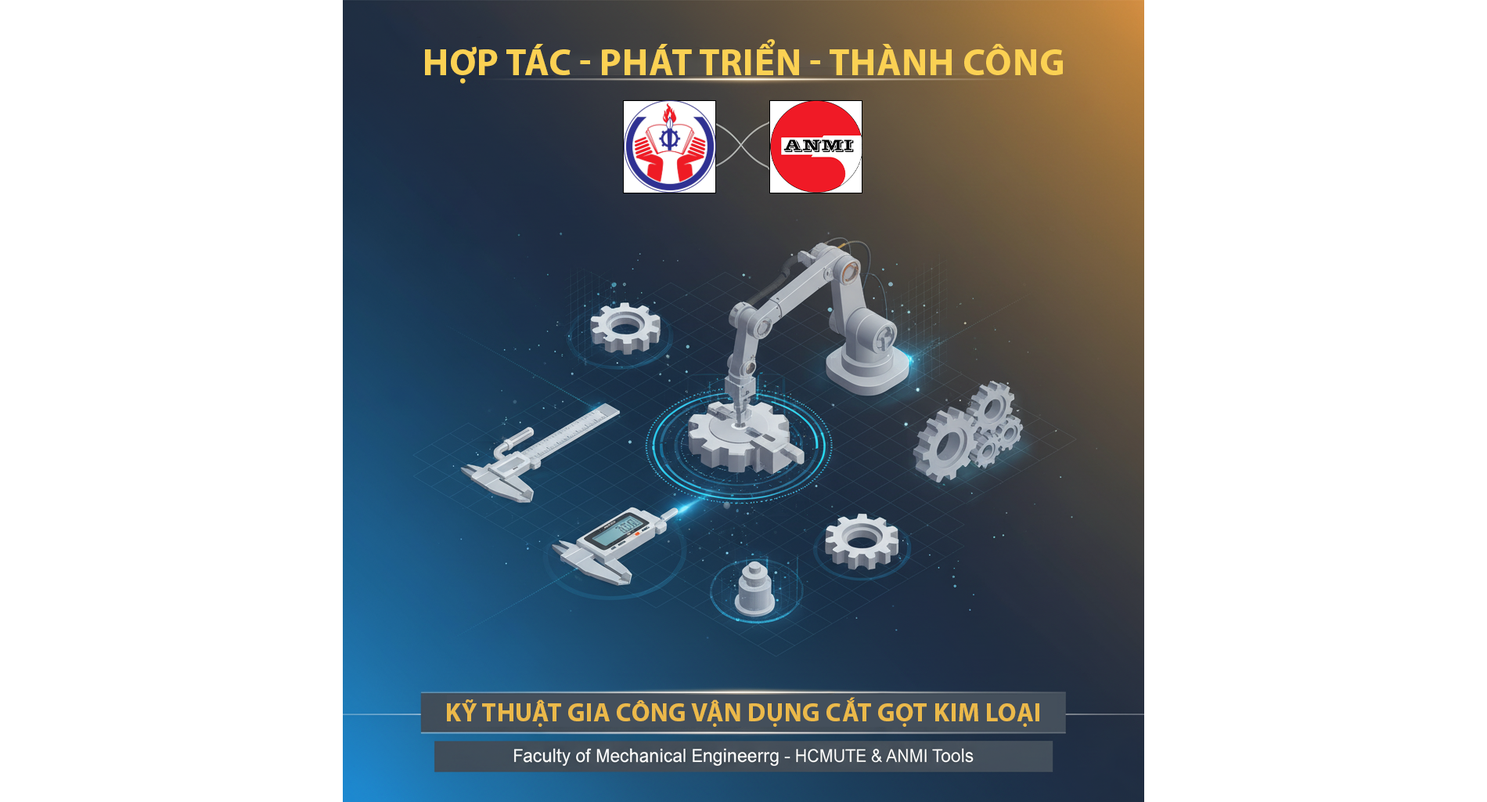
<style>
.page{position:relative;width:1487px;height:802px;background:#ffffff}
.page>*{position:absolute;margin:0}
.t1{font:37.6px "MyriadPro-Bold";color:#fbd153;text-transform:uppercase}
.t2{font:25.8px "MyriadPro-Bold";color:#ebb94a;text-transform:uppercase}
</style>
<div class="page">
<p class="t1" style="left:425px;top:39px;width:638px;height:45px">hợp tác - phát triển - thành công</p>
<p class="t2" style="left:447px;top:697px;width:593px;height:30px">kỹ thuật gia công vận dụng cắt gọt kim loại</p>
</div>
